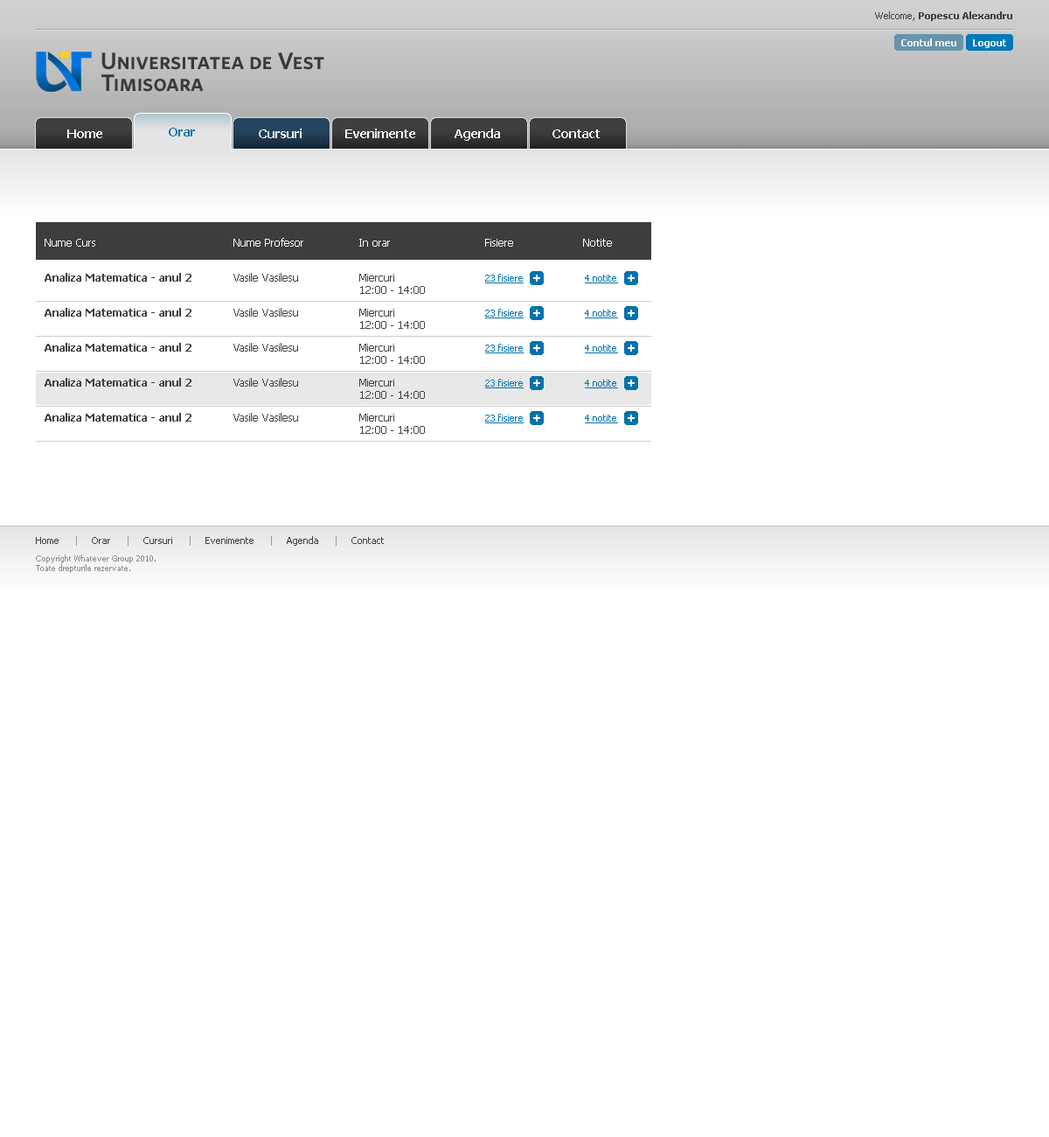
<style>
.page{position:relative;width:1049px;height:1137px;background:#ffffff}
.page>*{position:absolute;margin:0}
.t1{font:9.6px "Tahoma-Bold";color:#404040}
.t2{font:9.6px "Tahoma";color:#404040}
.t3{font:9.6px "Tahoma-Bold";color:#fefefe}
.t4{font:12.2px "Tahoma-Bold";color:#ffffff}
.t5{font:12.2px "Tahoma-Bold";color:#0172ac}
.t6{font:10.5px "Tahoma";color:#ffffff}
.t7{font:10.5px "Tahoma-Bold";color:#404040}
.t8{font:10.5px "Tahoma";color:#404040}
.t9{font:9.6px "Tahoma";color:#0172ac;text-decoration:underline}
.t10{font:7.9px/17.5px "Tahoma";color:#8d8d8d}
.t11{font:9.6px "Tahoma";color:#9a9a9a}
.t12{font:7.9px "Tahoma";color:#8d8d8d}
</style>
<div class="page">
<p class="t1" style="left:875px;top:11px;width:137px;height:10px"><span class="t2">Welcome, </span>Popescu Alexandru</p>
<p class="t3" style="left:901px;top:38px;width:55px;height:8px;opacity:0.9">Contul meu</p>
<p class="t3" style="left:973px;top:39px;width:33px;height:9px">Logout</p>
<p class="t4" style="left:67px;top:129px;width:35px;height:9px">Home</p>
<p class="t5" style="left:169px;top:128px;width:26px;height:8px">Orar</p>
<p class="t4" style="left:259px;top:129px;width:43px;height:9px">Cursuri</p>
<p class="t4" style="left:345px;top:129px;width:70px;height:9px">Evenimente</p>
<p class="t4" style="left:455px;top:129px;width:45px;height:12px">Agenda</p>
<p class="t4" style="left:553px;top:129px;width:47px;height:9px">Contact</p>
<p class="t6" style="left:45px;top:238px;width:567px;height:9px">Nume Curs     Nume Profesor  In orar    Fisiere    Notite</p>
<p class="t7" style="left:45px;top:273px;width:253px;height:9px">Analiza Matematica - anul 2  <span class="t8">Vasile Vasilesu</span></p>
<p class="t8" style="left:359px;top:274px;width:66px;height:20px">Miercuri<br>12:00 - 14:00</p>
<p class="t9" style="left:485px;top:274px;width:39px;height:9px">23 fisiere</p>
<p class="t9" style="left:585px;top:275px;width:33px;height:8px">4 notite</p>
<p class="t7" style="left:45px;top:308px;width:253px;height:8px">Analiza Matematica - anul 2  <span class="t8">Vasile Vasilesu</span></p>
<p class="t8" style="left:359px;top:309px;width:66px;height:20px">Miercuri<br>12:00 - 14:00</p>
<p class="t9" style="left:485px;top:309px;width:39px;height:9px">23 fisiere</p>
<p class="t9" style="left:585px;top:309px;width:33px;height:9px">4 notite</p>
<p class="t7" style="left:45px;top:343px;width:253px;height:8px">Analiza Matematica - anul 2  <span class="t8">Vasile Vasilesu</span></p>
<p class="t8" style="left:359px;top:344px;width:66px;height:20px">Miercuri<br>12:00 - 14:00</p>
<p class="t9" style="left:485px;top:344px;width:39px;height:9px">23 fisiere</p>
<p class="t9" style="left:585px;top:344px;width:33px;height:9px">4 notite</p>
<p class="t7" style="left:45px;top:378px;width:253px;height:8px">Analiza Matematica - anul 2  <span class="t8">Vasile Vasilesu</span></p>
<p class="t8" style="left:359px;top:379px;width:66px;height:20px">Miercuri<br>12:00 - 14:00</p>
<p class="t9" style="left:485px;top:379px;width:39px;height:9px">23 fisiere</p>
<p class="t9" style="left:585px;top:379px;width:33px;height:9px">4 notite</p>
<p class="t7" style="left:45px;top:413px;width:253px;height:8px">Analiza Matematica - anul 2  <span class="t8">Vasile Vasilesu</span></p>
<p class="t8" style="left:359px;top:414px;width:66px;height:20px">Miercuri<br>12:00 - 14:00</p>
<p class="t9" style="left:485px;top:414px;width:39px;height:9px">23 fisiere</p>
<p class="t9" style="left:585px;top:414px;width:33px;height:9px">4 notite</p>
<p class="t10" style="left:36px;top:536px;width:348px;height:37px"><span class="t2">Home</span><span class="t11">      |     </span><span class="t2">Orar</span><span class="t11">      |     </span><span class="t2">Cursuri</span><span class="t11">      |     </span><span class="t2">Evenimente</span><span class="t11">      |     </span><span class="t2">Agenda</span><span class="t11">      |     </span><span class="t2">Contact<br></span>Copyright Whatever Group 2010.<br><span class="t12">Toate drepturile rezervate.</span></p>
</div>
